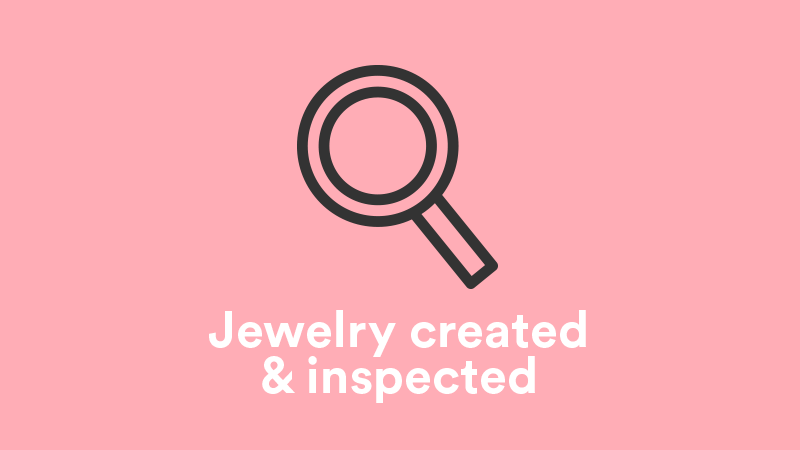
<style>
.page{position:relative;width:800px;height:450px;background:#ffadb6}
.page>*{position:absolute;margin:0}
.t1{font:50.7px/46.7px "CircularStd-Bold";color:#ffffff}
</style>
<div class="page">
<p class="t1" style="left:209px;top:310px;width:377px;height:93px;text-align:center">Jewelry created<br>&amp; inspected</p>
</div>
